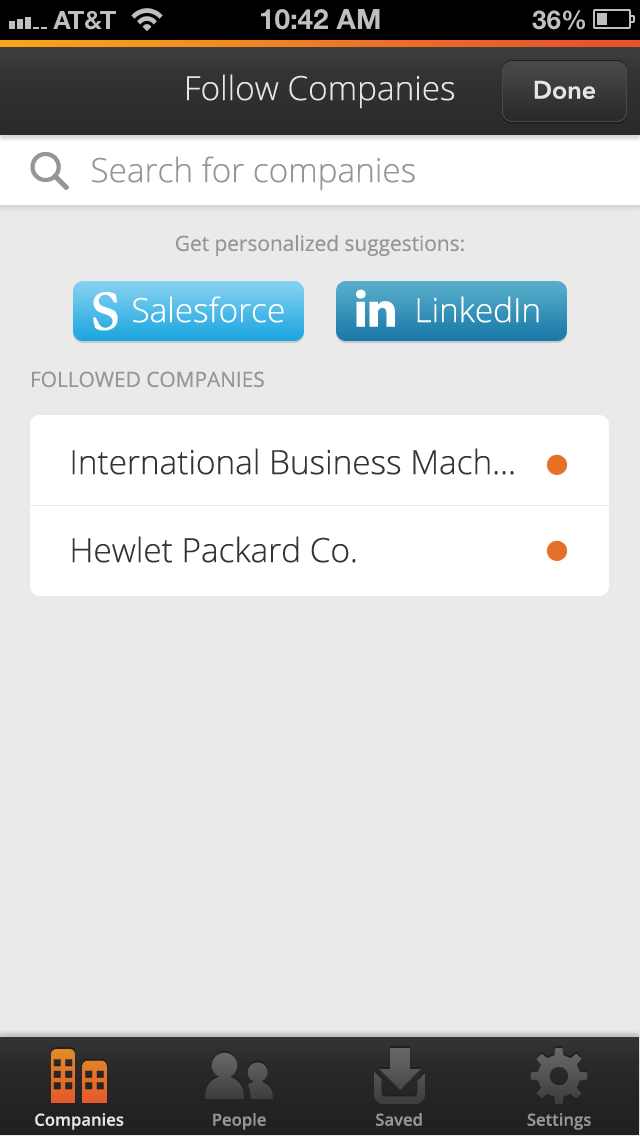
<style>
.page{position:relative;width:640px;height:1136px;background:#eaeaea}
.page>*{position:absolute;margin:0}
.t1{font:33.3px "OpenSans-Light";color:#e5e5e5}
.t2{font:25px "AvenirNext-DemiBold";color:#e5e5e5}
.t3{font:33.3px "OpenSans-Light";color:#969696}
.t4{font:20.8px "OpenSans";color:#969696}
.t5{font:33.3px "OpenSans-Light";color:#ffffff}
.t6{font:33.3px "OpenSans-Light";color:#343434}
.t7{font:16.7px "OpenSans-Semibold";color:#e5e5e5}
.t8{font:16.7px "OpenSans-Semibold";color:#969696}
</style>
<div class="page">
<p class="t1" style="left:187px;top:74px;width:268px;height:35px">Follow Companies</p>
<p class="t2" style="left:534px;top:80px;width:61px;height:19px">Done</p>
<p class="t3" style="left:92px;top:156px;width:323px;height:35px">Search for companies</p>
<p class="t4" style="left:176px;top:235px;width:288px;height:21px">Get personalized suggestions:</p>
<p class="t5" style="left:133px;top:296px;width:151px;height:27px">Salesforce</p>
<p class="t5" style="left:417px;top:296px;width:122px;height:27px">LinkedIn</p>
<p class="t4" style="left:32px;top:371px;width:232px;height:17px">FOLLOWED COMPANIES</p>
<p class="t6" style="left:72px;top:448px;width:442px;height:27px">International Business Mach...</p>
<p class="t6" style="left:72px;top:536px;width:284px;height:27px">Hewlet Packard Co.</p>
<p class="t7" style="left:35px;top:1113px;width:89px;height:17px">Companies</p>
<p class="t8" style="left:213px;top:1113px;width:53px;height:17px">People</p>
<p class="t8" style="left:376px;top:1113px;width:46px;height:13px">Saved</p>
<p class="t8" style="left:527px;top:1113px;width:64px;height:17px">Settings</p>
</div>
